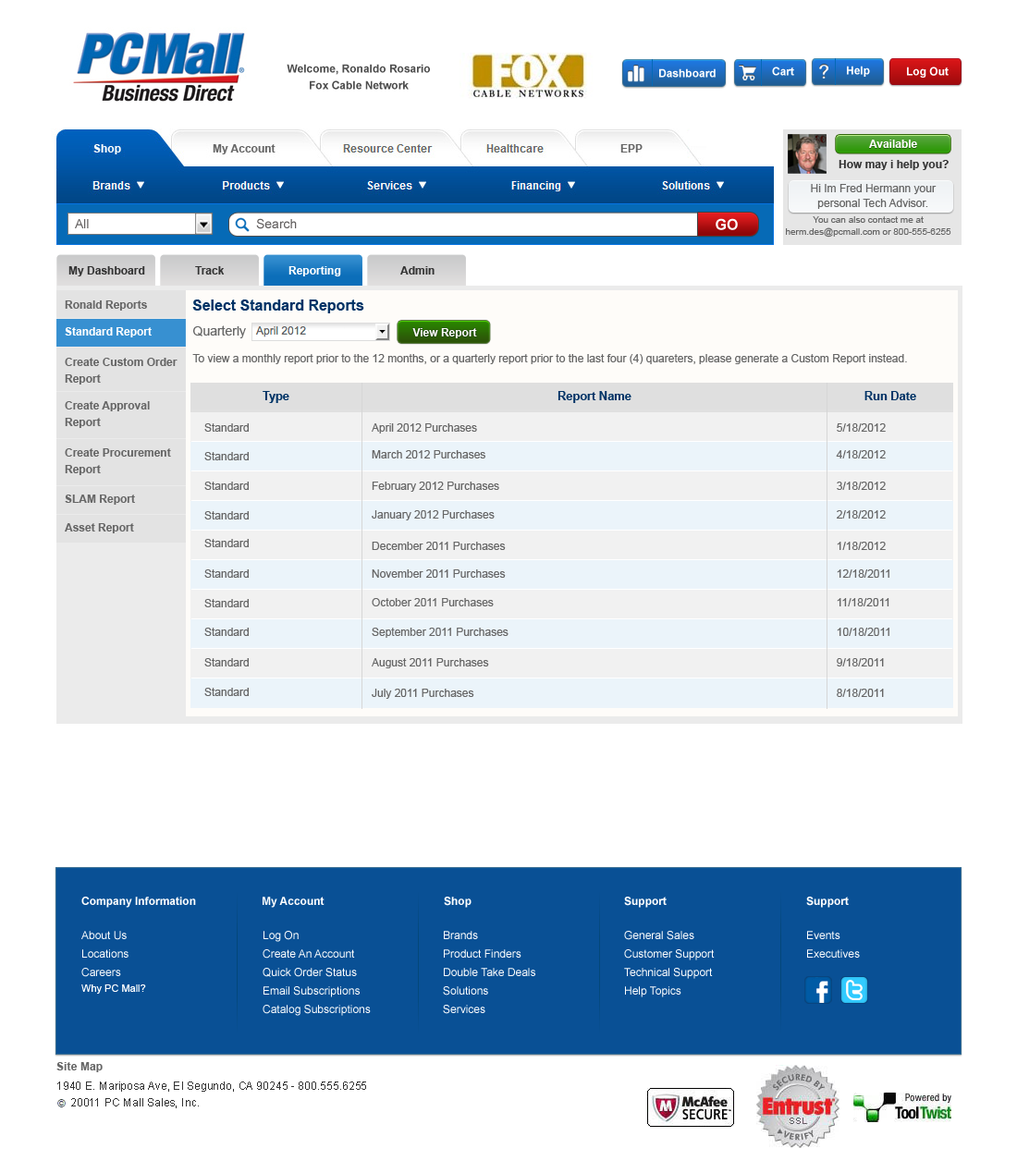
<style>
.page{position:relative;width:1017px;height:1173px;background:#ffffff}
.page>*{position:absolute;margin:0}
.t1{font:11.1px/16.6px "Arial-BoldMT";color:#4e4e4e}
.t2{font:11.1px "Arial-BoldMT";color:#feffff}
.t3{font:11.1px "Arial-BoldMT";color:#fffefe}
.t4{font:11.1px "Arial-BoldMT";color:#333333}
.t5{font:11.1px/14.8px "ArialMT";color:#666666}
.t6{font:12.9px "ArialMT";color:#625f5f}
.t7{font:14.8px "Arial-BoldMT";color:#ffffff}
.t8{font:9.2px/12px "ArialMT";color:#666666}
.t9{font:11.1px "Arial-BoldMT";color:#ffffff}
.t10{font:11.1px "Arial-BoldMT";color:#666666}
.t11{font:14.8px "Arial-BoldMT";color:#003366}
.t12{font:12.9px "ArialMT";color:#666666}
.t13{font:11.1px "ArialMT";color:#666666}
.t14{font:11.1px/16.6px "Arial-BoldMT";color:#666666}
.t15{font:11.8px "Arial-BoldMT";color:#003366}
.t16{font:11.1px/18.5px "ArialMT";color:#ffffff}
.t17{font:10.2px "ArialMT";color:#ffffff}
.t18{font:11.1px "Arial-BoldMT";letter-spacing:0.01em;color:#666666}
.t19{font:11.1px "ArialMT";letter-spacing:0.01em;color:#333333}
</style>
<div class="page">
<p class="t1" style="left:287px;top:64px;width:143px;height:26px;text-align:center">Welcome, Ronaldo Rosario <br>Fox Cable Network</p>
<p class="t2" style="left:847px;top:66px;width:23px;height:11px">Help</p>
<p class="t2" style="left:659px;top:68px;width:56px;height:10px">Dashboard</p>
<p class="t2" style="left:772px;top:67px;width:22px;height:9px">Cart</p>
<p class="t2" style="left:907px;top:67px;width:41px;height:11px">Log Out</p>
<p class="t3" style="left:869px;top:140px;width:48px;height:8px">Available</p>
<p class="t4" style="left:838px;top:160px;width:110px;height:10px">How may i help you?</p>
<p class="t5" style="left:811px;top:184px;width:125px;height:25px;text-align:center">Hi Im Fred Hermann your personal Tech Advisor.</p>
<p class="t6" style="left:75px;top:219px;width:14px;height:9px">All</p>
<p class="t6" style="left:256px;top:218px;width:41px;height:11px">Search</p>
<p class="t7" style="left:715px;top:218px;width:23px;height:12px">GOv</p>
<p class="t8" style="left:786px;top:216px;width:165px;height:22px;text-align:center">You can also contact me at herm.des@pcmall.com or 800-555-6255</p>
<p class="t4" style="left:68px;top:266px;width:77px;height:10px">My Dashboard</p>
<p class="t4" style="left:195px;top:266px;width:30px;height:9px">Track</p>
<p class="t9" style="left:288px;top:266px;width:53px;height:10px">Reporting</p>
<p class="t4" style="left:400px;top:266px;width:34px;height:9px">Admin</p>
<p class="t10" style="left:65px;top:300px;width:82px;height:11px">Ronald Reports</p>
<p class="t11" style="left:192px;top:299px;width:172px;height:14px">Select Standard Reports</p>
<p class="t9" style="left:65px;top:327px;width:87px;height:10px">Standard Report</p>
<p class="t12" style="left:193px;top:325px;width:53px;height:13px">Quarterly</p>
<p class="t9" style="left:412px;top:328px;width:65px;height:10px">View Report</p>
<p class="t13" style="left:192px;top:354px;width:715px;height:10px">To view a monthly report prior to the 12 months, or a quarterly report prior to the last four (4) quareters, please generate a Custom Report instead.</p>
<p class="t14" style="left:65px;top:358px;width:112px;height:26px">Create Custom Order Report</p>
<p class="t14" style="left:65px;top:401px;width:85px;height:27px">Create Approval <br>Report</p>
<p class="t15" style="left:262px;top:391px;width:27px;height:12px">Type</p>
<p class="t15" style="left:557px;top:391px;width:74px;height:12px">Report Name</p>
<p class="t15" style="left:864px;top:391px;width:52px;height:9px">Run Date</p>
<p class="t13" style="left:204px;top:423px;width:45px;height:9px">Standard</p>
<p class="t13" style="left:372px;top:423px;width:105px;height:10px">April 2012 Purchases</p>
<p class="t13" style="left:836px;top:423px;width:49px;height:9px">5/18/2012</p>
<p class="t14" style="left:65px;top:448px;width:106px;height:27px">Create Procurement Report</p>
<p class="t13" style="left:204px;top:452px;width:45px;height:8px">Standard</p>
<p class="t13" style="left:372px;top:450px;width:113px;height:8px">March 2012 Purchases</p>
<p class="t13" style="left:836px;top:450px;width:49px;height:8px">4/18/2012</p>
<p class="t13" style="left:204px;top:482px;width:45px;height:8px">Standard</p>
<p class="t13" style="left:372px;top:482px;width:127px;height:10px">February 2012 Purchases</p>
<p class="t13" style="left:836px;top:482px;width:49px;height:8px">3/18/2012</p>
<p class="t10" style="left:65px;top:494px;width:70px;height:11px">SLAM Report</p>
<p class="t13" style="left:204px;top:511px;width:45px;height:8px">Standard</p>
<p class="t13" style="left:372px;top:510px;width:122px;height:10px">January 2012 Purchases</p>
<p class="t13" style="left:836px;top:510px;width:49px;height:9px">2/18/2012</p>
<p class="t10" style="left:65px;top:523px;width:69px;height:10px">Asset Report</p>
<p class="t13" style="left:204px;top:539px;width:45px;height:8px">Standard</p>
<p class="t13" style="left:372px;top:542px;width:134px;height:8px">December 2011 Purchases</p>
<p class="t13" style="left:836px;top:542px;width:49px;height:8px">1/18/2012</p>
<p class="t13" style="left:204px;top:569px;width:45px;height:9px">Standard</p>
<p class="t13" style="left:372px;top:569px;width:134px;height:9px">November 2011 Purchases</p>
<p class="t13" style="left:836px;top:569px;width:53px;height:9px">12/18/2011</p>
<p class="t13" style="left:204px;top:599px;width:45px;height:8px">Standard</p>
<p class="t13" style="left:372px;top:598px;width:122px;height:8px">October 2011 Purchases</p>
<p class="t13" style="left:836px;top:598px;width:53px;height:8px">11/18/2011</p>
<p class="t13" style="left:204px;top:628px;width:45px;height:8px">Standard</p>
<p class="t13" style="left:372px;top:628px;width:136px;height:10px">September 2011 Purchases</p>
<p class="t13" style="left:836px;top:628px;width:53px;height:8px">10/18/2011</p>
<p class="t13" style="left:204px;top:658px;width:45px;height:8px">Standard</p>
<p class="t13" style="left:372px;top:658px;width:117px;height:10px">August 2011 Purchases</p>
<p class="t13" style="left:836px;top:658px;width:48px;height:8px">9/18/2011</p>
<p class="t13" style="left:204px;top:688px;width:45px;height:8px">Standard</p>
<p class="t13" style="left:372px;top:689px;width:102px;height:10px">July 2011 Purchases</p>
<p class="t13" style="left:836px;top:689px;width:48px;height:8px">8/18/2011</p>
<p class="t9" style="left:81px;top:897px;width:115px;height:11px">Company Information</p>
<p class="t9" style="left:262px;top:897px;width:62px;height:11px">My Account</p>
<p class="t9" style="left:444px;top:897px;width:27px;height:11px">Shop</p>
<p class="t9" style="left:624px;top:897px;width:42px;height:11px">Support</p>
<p class="t9" style="left:806px;top:897px;width:42px;height:11px">Support</p>
<p class="t16" style="left:81px;top:931px;width:47px;height:46px">About Us<br>Locations<br>Careers</p>
<p class="t16" style="left:262px;top:931px;width:109px;height:85px">Log On<br>Create An Account<br>Quick Order Status<br>Email Subscriptions<br>Catalog Subscriptions</p>
<p class="t16" style="left:443px;top:931px;width:92px;height:83px">Brands<br>Product Finders<br>Double Take Deals<br>Solutions<br>Services</p>
<p class="t16" style="left:624px;top:931px;width:90px;height:66px">General Sales<br>Customer Support<br>Technical Support<br>Help Topics</p>
<p class="t16" style="left:807px;top:931px;width:53px;height:27px">Events<br>Executives</p>
<p class="t17" style="left:81px;top:984px;width:65px;height:10px">Why PC Mall?</p>
<p class="t18" style="left:56px;top:1062px;width:47px;height:10px">Site Map</p>
<p class="t19" style="left:57px;top:1081px;width:309px;height:11px">1940 E. Mariposa Ave, El Segundo, CA 90245 - 800.555.6255</p>
<p class="t19" style="left:71px;top:1098px;width:128px;height:10px">20011 PC Mall Sales, Inc.</p>
</div>
